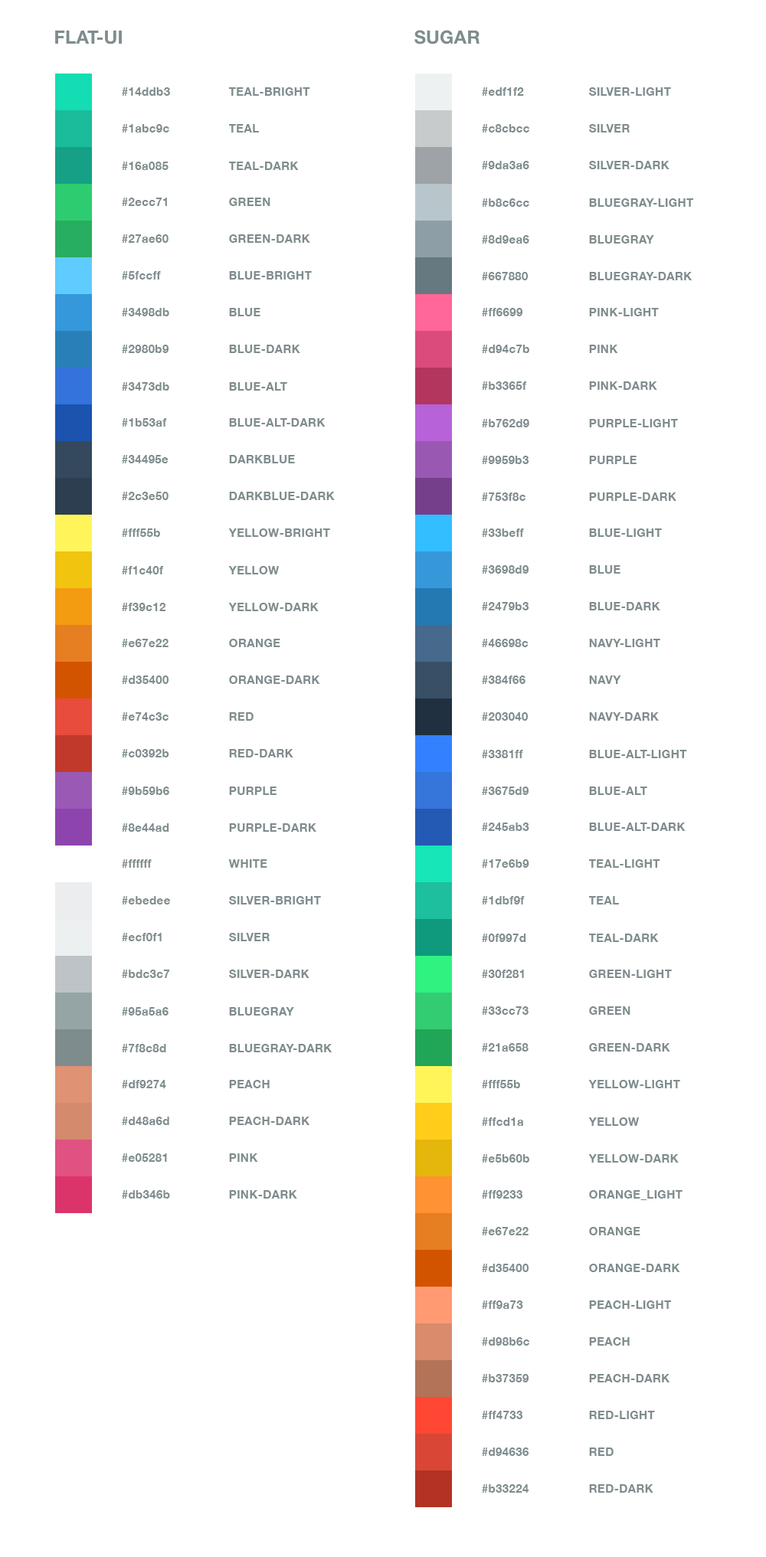
<style>
.page{position:relative;width:766px;height:1557px;background:#ffffff}
.page>*{position:absolute;margin:0}
.t1{font:18.4px "HelveticaNeue-Bold";letter-spacing:0.01em;color:#7f8c8d}
.t2{font:11.8px "HelveticaNeue-Bold";letter-spacing:0.01em;color:#7f8c8d}
</style>
<div class="page">
<p class="t1" style="left:55px;top:30px;width:67px;height:14px">FLAT-UI</p>
<p class="t1" style="left:414px;top:30px;width:65px;height:14px">SUGAR</p>
<p class="t2" style="left:122px;top:87px;width:48px;height:9px">#14ddb3</p>
<p class="t2" style="left:229px;top:87px;width:81px;height:9px">TEAL-BRIGHT</p>
<p class="t2" style="left:482px;top:87px;width:42px;height:9px">#edf1f2</p>
<p class="t2" style="left:589px;top:87px;width:82px;height:9px">SILVER-LIGHT</p>
<p class="t2" style="left:122px;top:124px;width:47px;height:8px">#1abc9c</p>
<p class="t2" style="left:229px;top:124px;width:30px;height:8px">TEAL</p>
<p class="t2" style="left:482px;top:124px;width:47px;height:8px">#c8cbcc</p>
<p class="t2" style="left:589px;top:124px;width:41px;height:8px">SILVER</p>
<p class="t2" style="left:122px;top:162px;width:46px;height:8px">#16a085</p>
<p class="t2" style="left:229px;top:162px;width:70px;height:8px">TEAL-DARK</p>
<p class="t2" style="left:482px;top:161px;width:47px;height:8px">#9da3a6</p>
<p class="t2" style="left:589px;top:161px;width:80px;height:8px">SILVER-DARK</p>
<p class="t2" style="left:122px;top:198px;width:45px;height:8px">#2ecc71</p>
<p class="t2" style="left:229px;top:198px;width:41px;height:8px">GREEN</p>
<p class="t2" style="left:482px;top:198px;width:47px;height:9px">#b8c6cc</p>
<p class="t2" style="left:589px;top:198px;width:104px;height:9px">BLUEGRAY-LIGHT</p>
<p class="t2" style="left:122px;top:234px;width:46px;height:9px">#27ae60</p>
<p class="t2" style="left:229px;top:234px;width:81px;height:9px">GREEN-DARK</p>
<p class="t2" style="left:482px;top:235px;width:47px;height:9px">#8d9ea6</p>
<p class="t2" style="left:589px;top:235px;width:65px;height:9px">BLUEGRAY</p>
<p class="t2" style="left:122px;top:271px;width:39px;height:9px">#5fccff</p>
<p class="t2" style="left:229px;top:271px;width:83px;height:9px">BLUE-BRIGHT</p>
<p class="t2" style="left:482px;top:272px;width:46px;height:8px">#667880</p>
<p class="t2" style="left:589px;top:272px;width:103px;height:8px">BLUEGRAY-DARK</p>
<p class="t2" style="left:122px;top:308px;width:47px;height:8px">#3498db</p>
<p class="t2" style="left:229px;top:308px;width:31px;height:8px">BLUE</p>
<p class="t2" style="left:482px;top:308px;width:40px;height:8px">#ff6699</p>
<p class="t2" style="left:589px;top:308px;width:70px;height:8px">PINK-LIGHT</p>
<p class="t2" style="left:122px;top:345px;width:46px;height:8px">#2980b9</p>
<p class="t2" style="left:229px;top:345px;width:71px;height:8px">BLUE-DARK</p>
<p class="t2" style="left:482px;top:345px;width:47px;height:8px">#d94c7b</p>
<p class="t2" style="left:589px;top:345px;width:29px;height:8px">PINK</p>
<p class="t2" style="left:122px;top:382px;width:47px;height:9px">#3473db</p>
<p class="t2" style="left:229px;top:382px;width:58px;height:9px">BLUE-ALT</p>
<p class="t2" style="left:482px;top:381px;width:44px;height:9px">#b3365f</p>
<p class="t2" style="left:589px;top:381px;width:68px;height:9px">PINK-DARK</p>
<p class="t2" style="left:122px;top:418px;width:45px;height:9px">#1b53af</p>
<p class="t2" style="left:229px;top:418px;width:96px;height:9px">BLUE-ALT-DARK</p>
<p class="t2" style="left:482px;top:419px;width:47px;height:8px">#b762d9</p>
<p class="t2" style="left:589px;top:419px;width:89px;height:8px">PURPLE-LIGHT</p>
<p class="t2" style="left:122px;top:455px;width:46px;height:8px">#34495e</p>
<p class="t2" style="left:229px;top:455px;width:66px;height:8px">DARKBLUE</p>
<p class="t2" style="left:482px;top:456px;width:47px;height:8px">#9959b3</p>
<p class="t2" style="left:589px;top:456px;width:47px;height:8px">PURPLE</p>
<p class="t2" style="left:122px;top:492px;width:46px;height:8px">#2c3e50</p>
<p class="t2" style="left:229px;top:492px;width:106px;height:8px">DARKBLUE-DARK</p>
<p class="t2" style="left:482px;top:492px;width:43px;height:9px">#753f8c</p>
<p class="t2" style="left:589px;top:492px;width:87px;height:9px">PURPLE-DARK</p>
<p class="t2" style="left:122px;top:528px;width:38px;height:9px">#fff55b</p>
<p class="t2" style="left:228px;top:528px;width:102px;height:9px">YELLOW-BRIGHT</p>
<p class="t2" style="left:482px;top:528px;width:42px;height:9px">#33beff</p>
<p class="t2" style="left:589px;top:528px;width:73px;height:9px">BLUE-LIGHT</p>
<p class="t2" style="left:122px;top:566px;width:41px;height:8px">#f1c40f</p>
<p class="t2" style="left:228px;top:566px;width:52px;height:8px">YELLOW</p>
<p class="t2" style="left:482px;top:565px;width:46px;height:9px">#3698d9</p>
<p class="t2" style="left:589px;top:565px;width:31px;height:9px">BLUE</p>
<p class="t2" style="left:122px;top:603px;width:43px;height:8px">#f39c12</p>
<p class="t2" style="left:228px;top:603px;width:91px;height:8px">YELLOW-DARK</p>
<p class="t2" style="left:482px;top:602px;width:47px;height:8px">#2479b3</p>
<p class="t2" style="left:589px;top:602px;width:71px;height:8px">BLUE-DARK</p>
<p class="t2" style="left:122px;top:639px;width:46px;height:8px">#e67e22</p>
<p class="t2" style="left:229px;top:639px;width:51px;height:8px">ORANGE</p>
<p class="t2" style="left:482px;top:639px;width:46px;height:8px">#46698c</p>
<p class="t2" style="left:589px;top:639px;width:71px;height:8px">NAVY-LIGHT</p>
<p class="t2" style="left:122px;top:675px;width:46px;height:9px">#d35400</p>
<p class="t2" style="left:229px;top:675px;width:91px;height:9px">ORANGE-DARK</p>
<p class="t2" style="left:482px;top:675px;width:43px;height:9px">#384f66</p>
<p class="t2" style="left:589px;top:675px;width:32px;height:9px">NAVY</p>
<p class="t2" style="left:122px;top:712px;width:46px;height:9px">#e74c3c</p>
<p class="t2" style="left:229px;top:712px;width:24px;height:9px">RED</p>
<p class="t2" style="left:482px;top:712px;width:46px;height:9px">#203040</p>
<p class="t2" style="left:589px;top:712px;width:70px;height:9px">NAVY-DARK</p>
<p class="t2" style="left:122px;top:749px;width:47px;height:8px">#c0392b</p>
<p class="t2" style="left:229px;top:749px;width:64px;height:8px">RED-DARK</p>
<p class="t2" style="left:482px;top:750px;width:41px;height:8px">#3381ff</p>
<p class="t2" style="left:589px;top:750px;width:98px;height:8px">BLUE-ALT-LIGHT</p>
<p class="t2" style="left:122px;top:787px;width:47px;height:8px">#9b59b6</p>
<p class="t2" style="left:229px;top:787px;width:47px;height:8px">PURPLE</p>
<p class="t2" style="left:482px;top:787px;width:46px;height:8px">#3675d9</p>
<p class="t2" style="left:589px;top:787px;width:58px;height:8px">BLUE-ALT</p>
<p class="t2" style="left:122px;top:823px;width:47px;height:9px">#8e44ad</p>
<p class="t2" style="left:229px;top:823px;width:87px;height:9px">PURPLE-DARK</p>
<p class="t2" style="left:482px;top:823px;width:47px;height:8px">#245ab3</p>
<p class="t2" style="left:589px;top:823px;width:96px;height:8px">BLUE-ALT-DARK</p>
<p class="t2" style="left:122px;top:859px;width:30px;height:9px">#ffffff</p>
<p class="t2" style="left:228px;top:859px;width:39px;height:9px">WHITE</p>
<p class="t2" style="left:482px;top:859px;width:47px;height:9px">#17e6b9</p>
<p class="t2" style="left:589px;top:859px;width:71px;height:9px">TEAL-LIGHT</p>
<p class="t2" style="left:122px;top:896px;width:48px;height:8px">#ebedee</p>
<p class="t2" style="left:229px;top:896px;width:92px;height:8px">SILVER-BRIGHT</p>
<p class="t2" style="left:482px;top:896px;width:43px;height:8px">#1dbf9f</p>
<p class="t2" style="left:589px;top:896px;width:30px;height:8px">TEAL</p>
<p class="t2" style="left:122px;top:933px;width:40px;height:8px">#ecf0f1</p>
<p class="t2" style="left:229px;top:933px;width:41px;height:8px">SILVER</p>
<p class="t2" style="left:482px;top:934px;width:44px;height:8px">#0f997d</p>
<p class="t2" style="left:589px;top:934px;width:70px;height:8px">TEAL-DARK</p>
<p class="t2" style="left:122px;top:970px;width:47px;height:8px">#bdc3c7</p>
<p class="t2" style="left:229px;top:970px;width:80px;height:8px">SILVER-DARK</p>
<p class="t2" style="left:482px;top:970px;width:42px;height:8px">#30f281</p>
<p class="t2" style="left:589px;top:970px;width:83px;height:8px">GREEN-LIGHT</p>
<p class="t2" style="left:122px;top:1007px;width:46px;height:9px">#95a5a6</p>
<p class="t2" style="left:229px;top:1007px;width:65px;height:9px">BLUEGRAY</p>
<p class="t2" style="left:482px;top:1006px;width:46px;height:9px">#33cc73</p>
<p class="t2" style="left:589px;top:1006px;width:41px;height:9px">GREEN</p>
<p class="t2" style="left:122px;top:1044px;width:44px;height:8px">#7f8c8d</p>
<p class="t2" style="left:229px;top:1044px;width:103px;height:8px">BLUEGRAY-DARK</p>
<p class="t2" style="left:482px;top:1043px;width:46px;height:9px">#21a658</p>
<p class="t2" style="left:589px;top:1043px;width:81px;height:9px">GREEN-DARK</p>
<p class="t2" style="left:122px;top:1080px;width:44px;height:8px">#df9274</p>
<p class="t2" style="left:229px;top:1080px;width:41px;height:8px">PEACH</p>
<p class="t2" style="left:482px;top:1080px;width:38px;height:8px">#fff55b</p>
<p class="t2" style="left:588px;top:1080px;width:92px;height:8px">YELLOW-LIGHT</p>
<p class="t2" style="left:122px;top:1117px;width:47px;height:8px">#d48a6d</p>
<p class="t2" style="left:229px;top:1117px;width:81px;height:8px">PEACH-DARK</p>
<p class="t2" style="left:482px;top:1117px;width:41px;height:9px">#ffcd1a</p>
<p class="t2" style="left:588px;top:1117px;width:51px;height:9px">YELLOW</p>
<p class="t2" style="left:122px;top:1153px;width:45px;height:9px">#e05281</p>
<p class="t2" style="left:229px;top:1153px;width:29px;height:9px">PINK</p>
<p class="t2" style="left:482px;top:1154px;width:47px;height:9px">#e5b60b</p>
<p class="t2" style="left:588px;top:1154px;width:91px;height:9px">YELLOW-DARK</p>
<p class="t2" style="left:122px;top:1190px;width:48px;height:9px">#db346b</p>
<p class="t2" style="left:229px;top:1190px;width:68px;height:9px">PINK-DARK</p>
<p class="t2" style="left:482px;top:1190px;width:41px;height:9px">#ff9233</p>
<p class="t2" style="left:589px;top:1190px;width:93px;height:10px">ORANGE_LIGHT</p>
<p class="t2" style="left:482px;top:1227px;width:46px;height:8px">#e67e22</p>
<p class="t2" style="left:589px;top:1227px;width:51px;height:8px">ORANGE</p>
<p class="t2" style="left:482px;top:1264px;width:46px;height:8px">#d35400</p>
<p class="t2" style="left:589px;top:1264px;width:91px;height:8px">ORANGE-DARK</p>
<p class="t2" style="left:482px;top:1300px;width:41px;height:9px">#ff9a73</p>
<p class="t2" style="left:589px;top:1300px;width:82px;height:9px">PEACH-LIGHT</p>
<p class="t2" style="left:482px;top:1337px;width:47px;height:9px">#d98b6c</p>
<p class="t2" style="left:589px;top:1337px;width:41px;height:9px">PEACH</p>
<p class="t2" style="left:482px;top:1374px;width:46px;height:8px">#b37359</p>
<p class="t2" style="left:589px;top:1374px;width:81px;height:8px">PEACH-DARK</p>
<p class="t2" style="left:482px;top:1411px;width:41px;height:8px">#ff4733</p>
<p class="t2" style="left:589px;top:1411px;width:66px;height:8px">RED-LIGHT</p>
<p class="t2" style="left:482px;top:1447px;width:46px;height:9px">#d94636</p>
<p class="t2" style="left:589px;top:1447px;width:24px;height:9px">RED</p>
<p class="t2" style="left:482px;top:1484px;width:47px;height:9px">#b33224</p>
<p class="t2" style="left:589px;top:1484px;width:64px;height:9px">RED-DARK</p>
</div>
